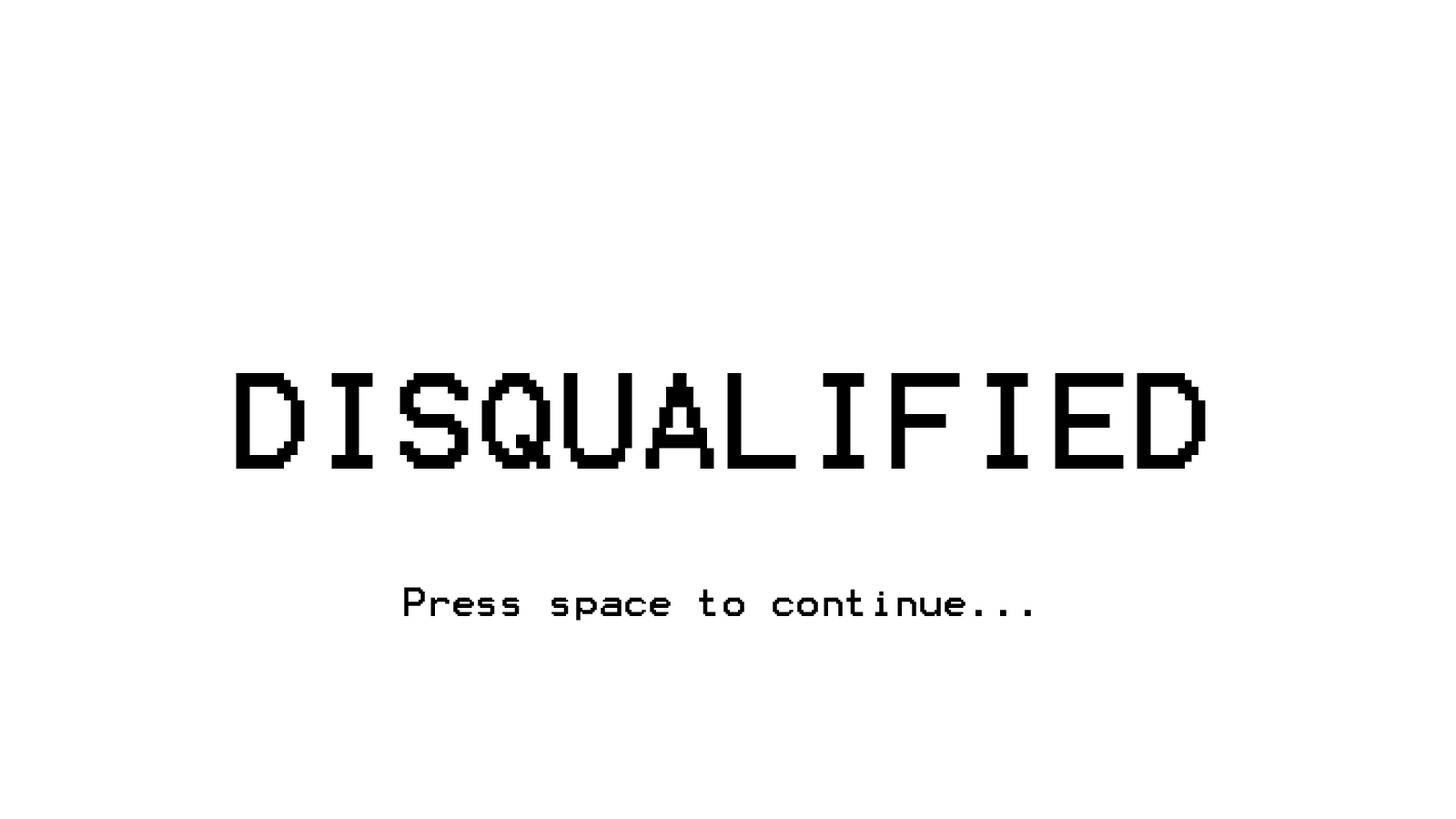
<style>
.page{position:relative;width:1456px;height:819px;background:#ffffff}
.page>*{position:absolute;margin:0}
.t1{font:109.2px "Terminal";color:#000000}
.t2{font:32.8px "Terminal";color:#000000}
</style>
<div class="page">
<p class="t1" style="left:236px;top:373px;width:970px;height:96px">DISQUALIFIED</p>
<p class="t2" style="left:404px;top:587px;width:627px;height:34px">Press space to continue...</p>
</div>
